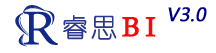
<style>
.page{position:relative;width:216px;height:53px;background:#ffffff}
.page>*{position:absolute;margin:0}
.t1{font:27px "CalistoMT";letter-spacing:0.2em;color:#f80808;font-weight:bold}
.t2{font:18px "MicrosoftYaHei";color:#000080;font-weight:bold;font-style:italic}
</style>
<div class="page">
<p class="t1" style="left:122px;top:17px;width:34px;height:20px">BI</p>
<p class="t2" style="left:168px;top:7px;width:39px;height:15px">V3.0</p>
</div>
